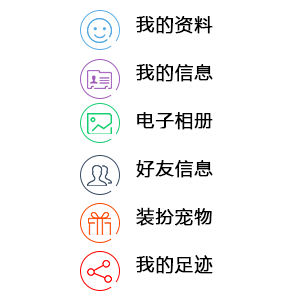
<style>
.page{position:relative;width:300px;height:300px;background:#ffffff}
.page>*{position:absolute;margin:0}
.t1{font:18px/48px "MicrosoftYaHei";letter-spacing:0.05em;color:#000000;font-weight:bold}
</style>
<div class="page">
<p class="t1" style="left:136px;top:16px;width:77px;height:258px">我的资料<br>我的信息<br>电子相册<br>好友信息<br>装扮宠物<br>我的足迹</p>
</div>
